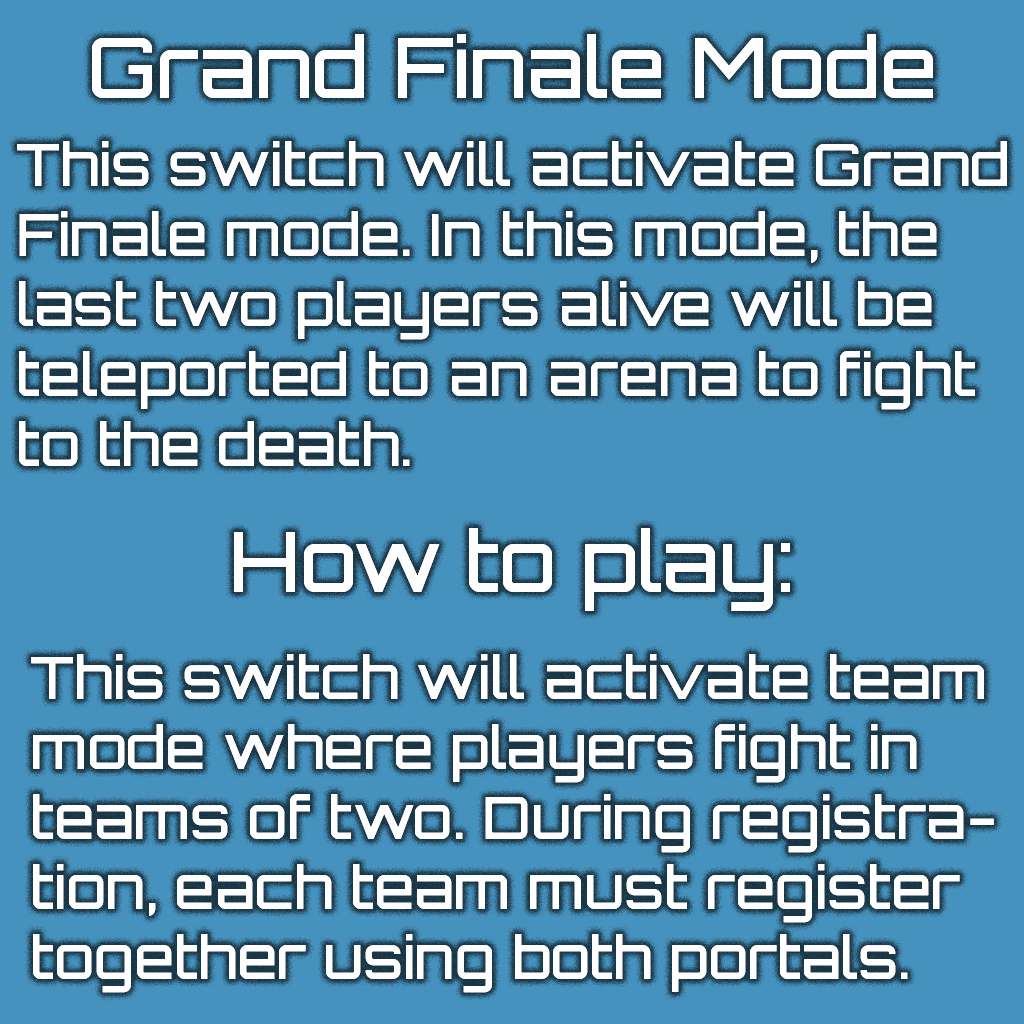
<style>
.page{position:relative;width:1024px;height:1024px;background:#4692be}
.page>*{position:absolute;margin:0}
.t1{font:83.3px "Orbitron-Medium";color:#fefefe}
.t2{font:58.3px "Orbitron-Medium";color:#fefefe}
</style>
<div class="page">
<p class="t1" style="left:92px;top:34px;width:841px;height:64px">Grand Finale Mode</p>
<p class="t2" style="left:17px;top:141px;width:990px;height:325px">This switch will activate Grand<br>Finale mode. In this mode, the<br>last two players alive will be<br>teleported to an arena to fight<br>to the death.</p>
<p class="t1" style="left:234px;top:528px;width:556px;height:83px">How to play:</p>
<p class="t2" style="left:31px;top:654px;width:963px;height:339px">This switch will activate team<br>mode where players fight in <br>teams of two. During registra-<br>tion, each team must register<br>together using both portals.</p>
</div>
